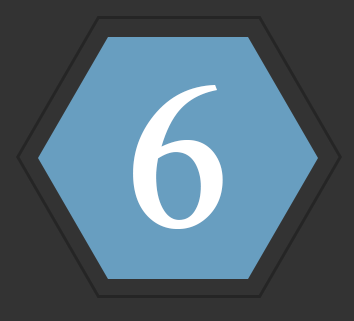
<style>
.page{position:relative;width:354px;height:321px;background:#333333}
.page>*{position:absolute;margin:0}
.t1{font:280px "Rod";color:#ffffff}
</style>
<div class="page">
<p class="t1" style="left:133px;top:84px;width:90px;height:145px">6</p>
</div>
